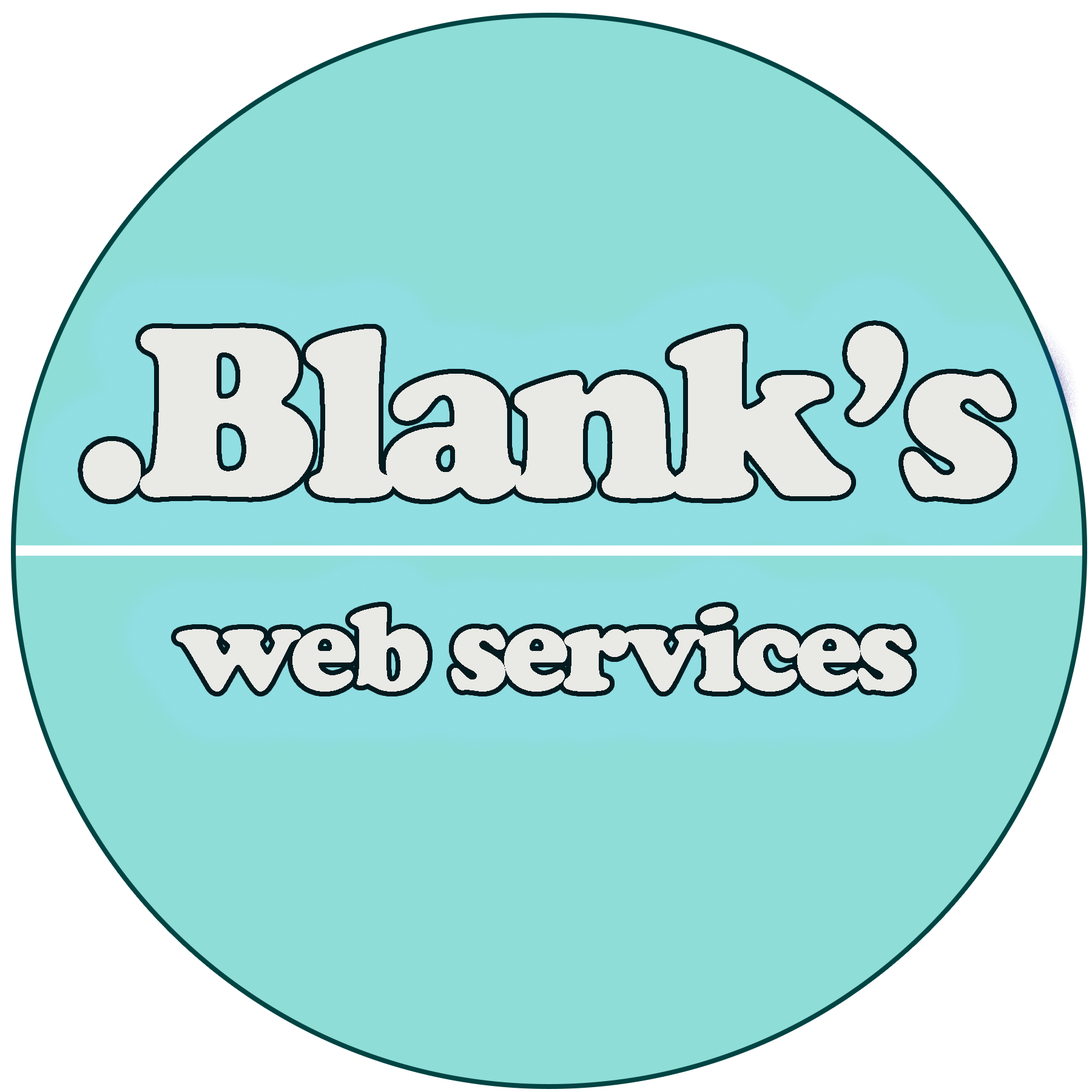
<style>
.page{position:relative;width:1092px;height:1092px;background:#8eddd7}
.page>*{position:absolute;margin:0}
.t1{font:250.2px "CooperBlack";letter-spacing:-0.05em;color:#e9e9e5}
.t2{font:125.3px "CooperBlack";letter-spacing:-0.05em;color:#e9e9e5}
</style>
<div class="page">
<p class="t1" style="left:83px;top:325px;width:930px;height:174px">.Blank’s</p>
<p class="t2" style="left:176px;top:607px;width:736px;height:85px">web services</p>
</div>
